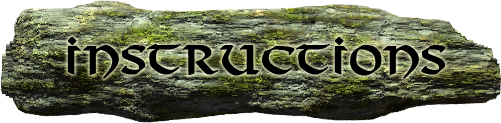
<style>
.page{position:relative;width:501px;height:123px}
.page>*{position:absolute;margin:0}
.t1{font:38px "Viking-Medium";color:#000000;font-weight:bold}
</style>
<div class="page">
<p class="t1" style="left:67px;top:37px;width:379px;height:42px">instructions</p>
</div>
